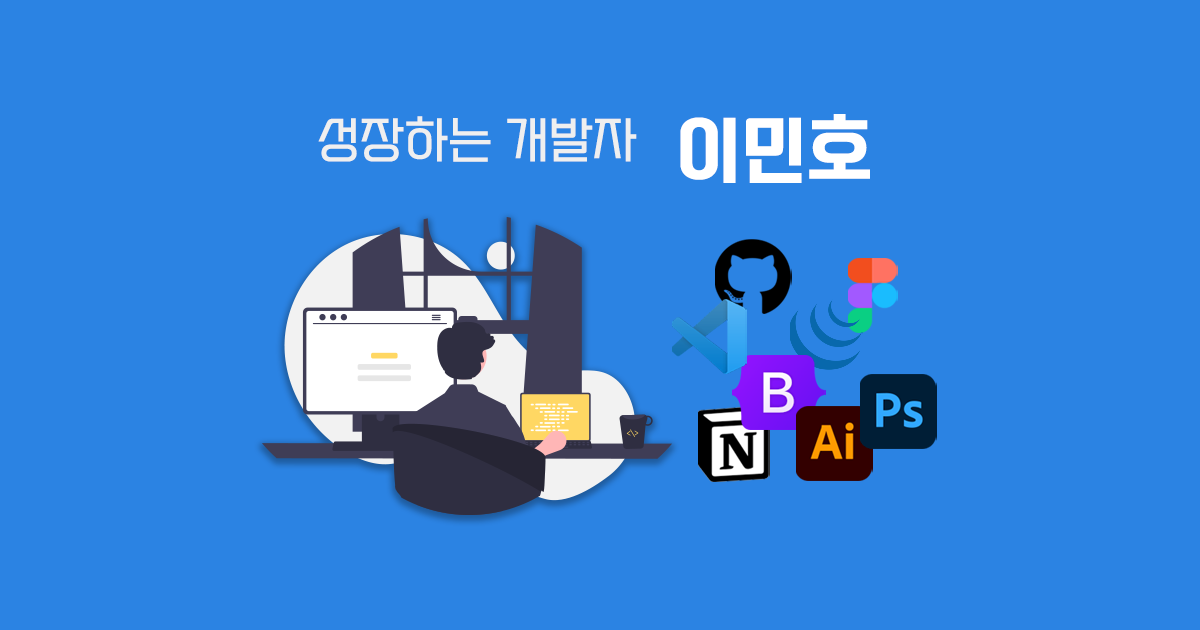
<style>
.page{position:relative;width:1200px;height:630px;background:#2b83e3}
.page>*{position:absolute;margin:0}
.t1{font:48px "SEBANGGothic";letter-spacing:0.01em;color:#efefef}
.t2{font:71.5px "SEBANGGothicBold";letter-spacing:0.01em;color:#ffffff}
</style>
<div class="page">
<p class="t1" style="left:318px;top:116px;width:319px;height:46px">성장하는 개발자</p>
<p class="t2" style="left:680px;top:114px;width:190px;height:69px">이민호</p>
</div>
